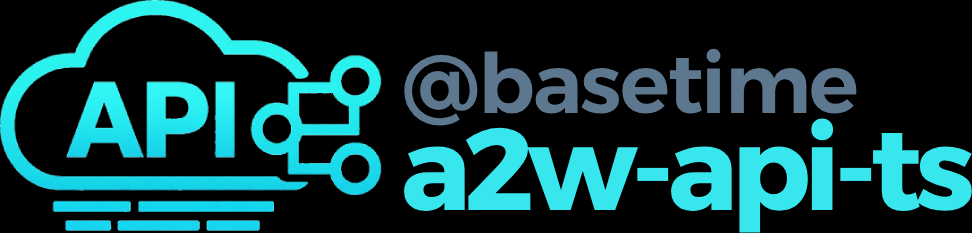
<style>
.page{position:relative;width:972px;height:233px;background:#000000}
.page>*{position:absolute;margin:0}
.t1{font:83px "Alexandria-SemiBold";letter-spacing:-0.022em;color:#5d778f}
.t2{font:116px "Alexandria-Bold";letter-spacing:-0.056em;color:#38e7ee}
</style>
<div class="page">
<p class="t1" style="left:404px;top:48px;width:453px;height:78px">@basetime</p>
<p class="t2" style="left:404px;top:118px;width:568px;height:115px">a2w-api-ts</p>
</div>
